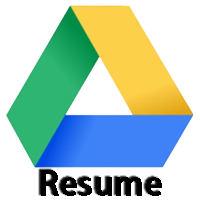
<style>
.page{position:relative;width:200px;height:200px;background:#ffffff}
.page>*{position:absolute;margin:0}
.t1{font:32px "AdobeHeitiStd-Regular";letter-spacing:0.01em;color:#000000;font-weight:bold}
</style>
<div class="page">
<p class="t1" style="left:41px;top:170px;width:121px;height:26px">Resume</p>
</div>
